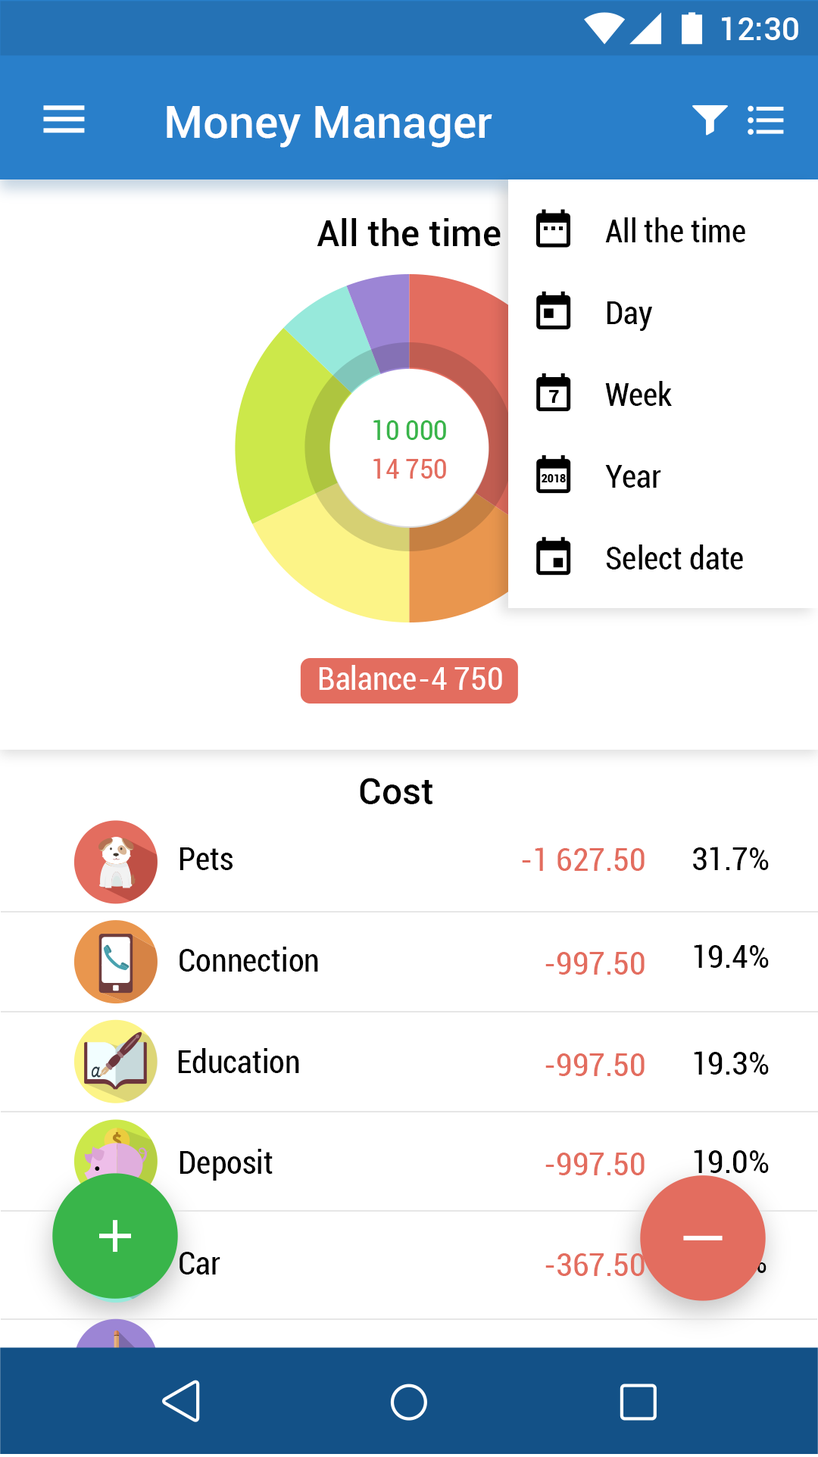
<style>
.page{position:relative;width:818px;height:1457px;background:#ffffff}
.page>*{position:absolute;margin:0}
.t1{font:31.8px "Roboto-Medium";color:#ffffff}
.t2{font:45.4px "Roboto-Medium";color:#ffffff}
.t3{font:36.5px "Roboto-Medium";color:#000000}
.t4{font:31.8px "Roboto-Condensed";color:#000000}
.t5{font:27.3px "Roboto-Condensed";color:#39b54a}
.t6{font:27.3px "Roboto-Condensed";color:#e36d5f}
.t7{font:31.8px "Roboto-Condensed";color:#ffffff}
.t8{font:36.4px "Roboto-Medium";color:#000000}
.t9{font:31.8px "Roboto-Condensed";color:#e36d5f}
</style>
<div class="page">
<p class="t1" style="left:722px;top:17px;width:76px;height:23px">12:30</p>
<p class="t2" style="left:167px;top:106px;width:325px;height:42px">Money Manager</p>
<p class="t3" style="left:317px;top:218px;width:184px;height:28px">All the time</p>
<p class="t4" style="left:605px;top:217px;width:140px;height:25px">All the time</p>
<p class="t4" style="left:607px;top:301px;width:45px;height:30px">Day</p>
<p class="t4" style="left:605px;top:381px;width:67px;height:25px">Week</p>
<p class="t5" style="left:373px;top:420px;width:73px;height:20px">10 000</p>
<p class="t6" style="left:373px;top:458px;width:73px;height:21px">14 750</p>
<p class="t4" style="left:605px;top:465px;width:56px;height:23px">Year</p>
<p class="t4" style="left:606px;top:545px;width:137px;height:25px">Select date</p>
<p class="t7" style="left:319px;top:665px;width:97px;height:25px">Balance</p>
<p class="t7" style="left:420px;top:667px;width:82px;height:23px">-4 750</p>
<p class="t8" style="left:360px;top:778px;width:73px;height:27px">Сost</p>
<p class="t4" style="left:180px;top:848px;width:53px;height:22px">Pets</p>
<p class="t9" style="left:522px;top:848px;width:123px;height:23px">-1 627.50</p>
<p class="t4" style="left:693px;top:847px;width:76px;height:23px">31.7%</p>
<p class="t4" style="left:180px;top:947px;width:138px;height:25px">Connection</p>
<p class="t9" style="left:545px;top:952px;width:100px;height:23px">-997.50</p>
<p class="t4" style="left:694px;top:945px;width:75px;height:23px">19.4%</p>
<p class="t4" style="left:178px;top:1048px;width:121px;height:25px">Education</p>
<p class="t9" style="left:545px;top:1054px;width:100px;height:22px">-997.50</p>
<p class="t4" style="left:694px;top:1051px;width:75px;height:24px">19.3%</p>
<p class="t4" style="left:180px;top:1149px;width:93px;height:32px">Deposit</p>
<p class="t9" style="left:545px;top:1153px;width:100px;height:23px">-997.50</p>
<p class="t4" style="left:694px;top:1150px;width:75px;height:23px">19.0%</p>
<p class="t4" style="left:180px;top:1252px;width:40px;height:23px">Car</p>
<p class="t9" style="left:545px;top:1254px;width:100px;height:22px">-367.50</p>
</div>
